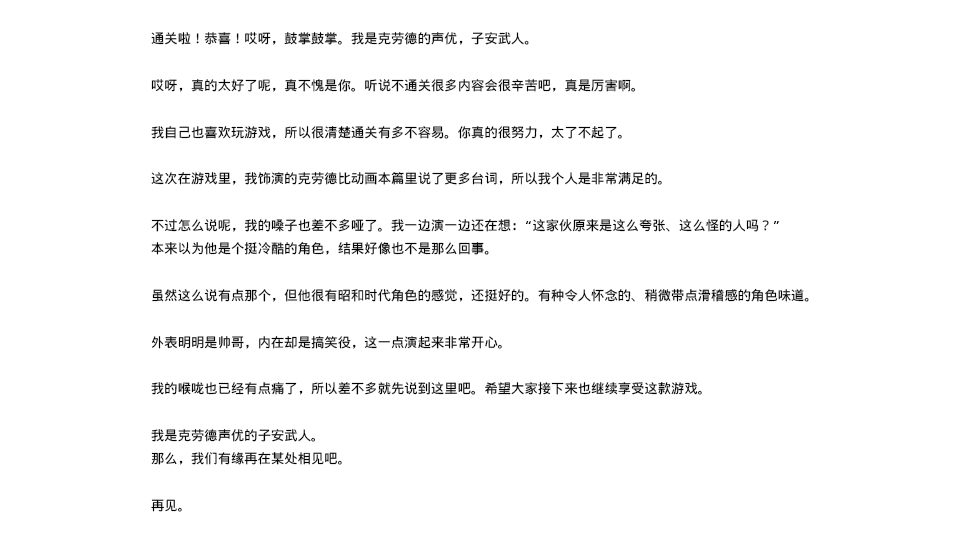
<style>
.page{position:relative;width:960px;height:544px;background:#ffffff}
.page>*{position:absolute;margin:0}
.t1{font:13.3px "WenQuanYiMicroHeiMono";color:#000000}
</style>
<div class="page">
<p class="t1" style="left:151px;top:32px;width:658px;height:480px">通关啦！恭喜！哎呀，鼓掌鼓掌。我是克劳德的声优，子安武人。<br><br>哎呀，真的太好了呢，真不愧是你。听说不通关很多内容会很辛苦吧，真是厉害啊。<br><br>我自己也喜欢玩游戏，所以很清楚通关有多不容易。你真的很努力，太了不起了。<br><br>这次在游戏里，我饰演的克劳德比动画本篇里说了更多台词，所以我个人是非常满足的。<br><br>不过怎么说呢，我的嗓子也差不多哑了。我一边演一边还在想：“这家伙原来是这么夸张、这么怪的人吗？”<br>本来以为他是个挺冷酷的角色，结果好像也不是那么回事。<br><br>虽然这么说有点那个，但他很有昭和时代角色的感觉，还挺好的。有种令人怀念的、稍微带点滑稽感的角色味道。<br><br>外表明明是帅哥，内在却是搞笑役，这一点演起来非常开心。<br><br>我的喉咙也已经有点痛了，所以差不多就先说到这里吧。希望大家接下来也继续享受这款游戏。<br><br>我是克劳德声优的子安武人。<br>那么，我们有缘再在某处相见吧。<br><br>再见。</p>
</div>
